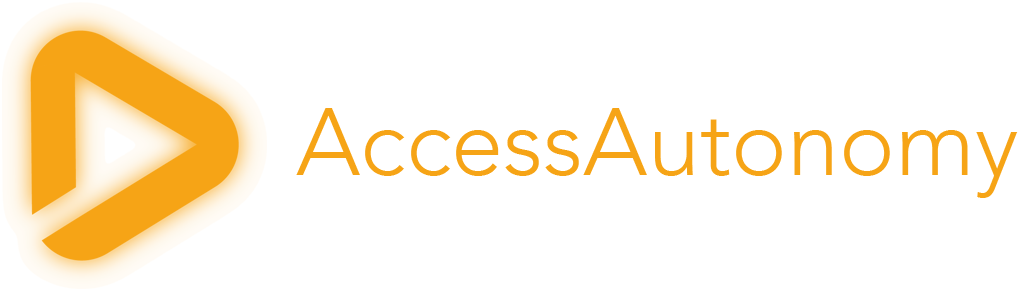
<style>
.page{position:relative;width:1021px;height:291px;background:#ffffff}
.page>*{position:absolute;margin:0}
.t1{font:94px "Avenir-Light";color:#f6a416}
</style>
<div class="page">
<p class="t1" style="left:296px;top:108px;width:722px;height:90px">AccessAutonomy</p>
</div>
